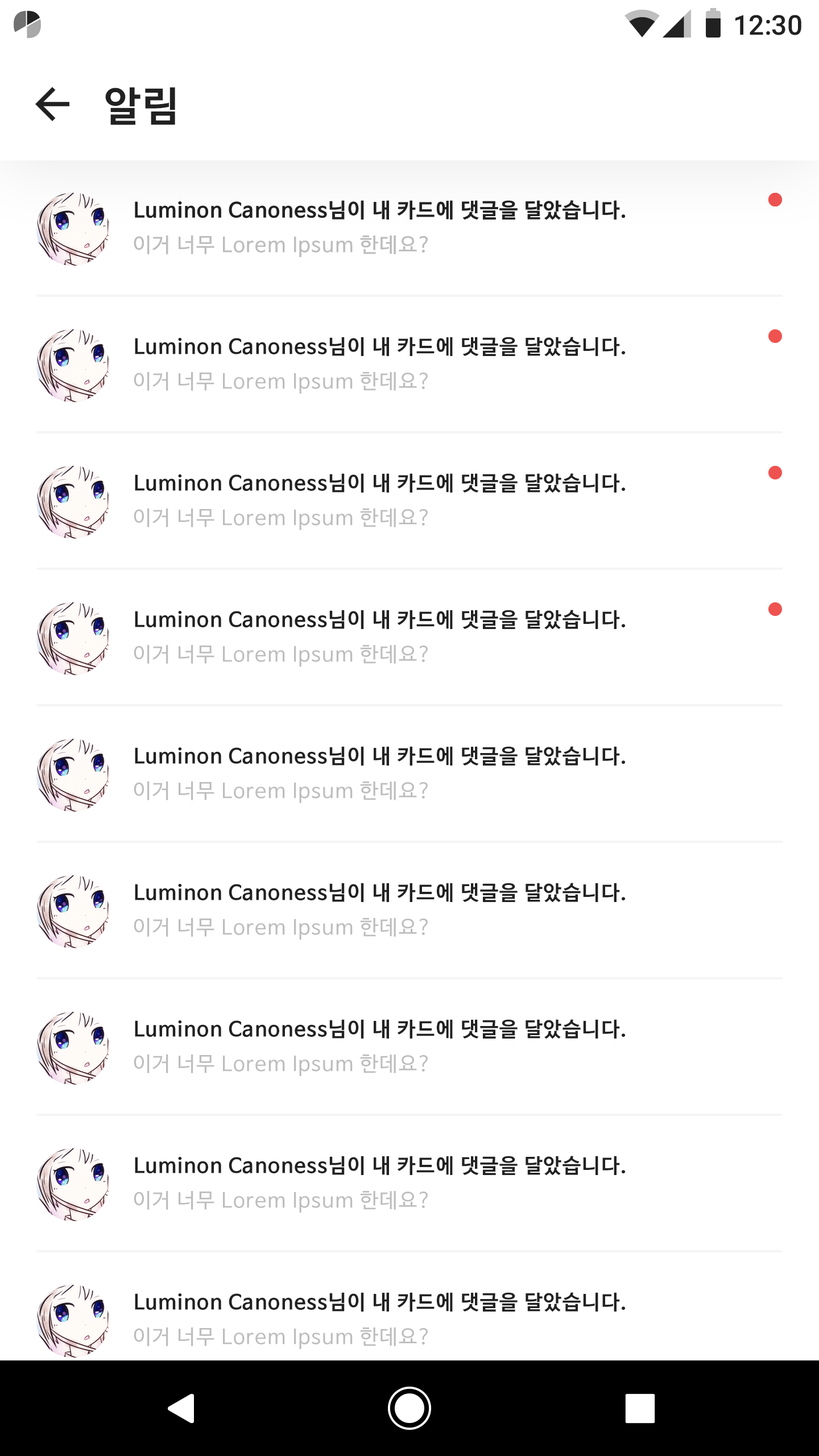
<style>
.page{position:relative;width:819px;height:1456px;background:#ffffff}
.page>*{position:absolute;margin:0}
.t1{font:27.3px "Roboto-Medium";color:#212121}
.t2{font:40.9px "NanumBarunGothicBold";letter-spacing:0.05em;color:#212121}
.t3{font:20.5px "NanumBarunGothicBold";letter-spacing:0.05em;color:#212121}
.t4{font:20.5px "NanumBarunGothic";letter-spacing:0.05em;color:#bdbdbd}
</style>
<div class="page">
<p class="t1" style="left:735px;top:15px;width:66px;height:20px">12:30</p>
<p class="t2" style="left:105px;top:87px;width:70px;height:38px">알림</p>
<p class="t3" style="left:135px;top:200px;width:490px;height:20px">Luminon Canoness님이 내 카드에 댓글을 달았습니다.</p>
<p class="t3" style="left:135px;top:200px;width:490px;height:20px">Luminon Canoness님이 내 카드에 댓글을 달았습니다.</p>
<p class="t4" style="left:134px;top:235px;width:294px;height:22px">이거 너무 Lorem Ipsum 한데요?</p>
<p class="t4" style="left:134px;top:235px;width:294px;height:22px">이거 너무 Lorem Ipsum 한데요?</p>
<p class="t3" style="left:135px;top:337px;width:490px;height:20px">Luminon Canoness님이 내 카드에 댓글을 달았습니다.</p>
<p class="t4" style="left:134px;top:372px;width:294px;height:22px">이거 너무 Lorem Ipsum 한데요?</p>
<p class="t3" style="left:135px;top:473px;width:490px;height:20px">Luminon Canoness님이 내 카드에 댓글을 달았습니다.</p>
<p class="t4" style="left:134px;top:508px;width:294px;height:22px">이거 너무 Lorem Ipsum 한데요?</p>
<p class="t3" style="left:135px;top:610px;width:490px;height:20px">Luminon Canoness님이 내 카드에 댓글을 달았습니다.</p>
<p class="t4" style="left:134px;top:645px;width:294px;height:22px">이거 너무 Lorem Ipsum 한데요?</p>
<p class="t3" style="left:135px;top:746px;width:490px;height:20px">Luminon Canoness님이 내 카드에 댓글을 달았습니다.</p>
<p class="t4" style="left:134px;top:781px;width:294px;height:22px">이거 너무 Lorem Ipsum 한데요?</p>
<p class="t3" style="left:135px;top:883px;width:490px;height:20px">Luminon Canoness님이 내 카드에 댓글을 달았습니다.</p>
<p class="t4" style="left:134px;top:918px;width:294px;height:22px">이거 너무 Lorem Ipsum 한데요?</p>
<p class="t3" style="left:135px;top:1019px;width:490px;height:20px">Luminon Canoness님이 내 카드에 댓글을 달았습니다.</p>
<p class="t4" style="left:134px;top:1054px;width:294px;height:22px">이거 너무 Lorem Ipsum 한데요?</p>
<p class="t3" style="left:135px;top:1156px;width:490px;height:20px">Luminon Canoness님이 내 카드에 댓글을 달았습니다.</p>
<p class="t4" style="left:134px;top:1191px;width:294px;height:22px">이거 너무 Lorem Ipsum 한데요?</p>
<p class="t3" style="left:135px;top:1292px;width:490px;height:20px">Luminon Canoness님이 내 카드에 댓글을 달았습니다.</p>
<p class="t4" style="left:134px;top:1327px;width:294px;height:22px">이거 너무 Lorem Ipsum 한데요?</p>
</div>
